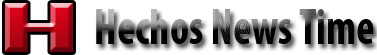
<style>
.page{position:relative;width:377px;height:55px;background:#ffffff}
.page>*{position:absolute;margin:0}
.t1{font:72.7px "MyriadPro-BoldCond";scale:2.35 1}
.t2{font:50.6px "MyriadPro-BoldCond";scale:0.87 1}
</style>
<div class="page">
<p class="t1" style="left:5px;top:3px;width:68px;height:49px">H</p>
<p class="t2" style="left:96px;top:9px;width:278px;height:35px">Hechos News Time</p>
</div>
